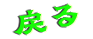
<style>
.page{position:relative;width:93px;height:39px;background:#ffffff}
.page>*{position:absolute;margin:0}
.t1{font:31.6px "GraveBustedStoneLishuSCRoughlyC";color:#16fc05;scale:1.27 1}
</style>
<div class="page">
<p class="t1" style="left:14px;top:4px;width:64px;height:31px;rotate:-9deg">戻る</p>
</div>
